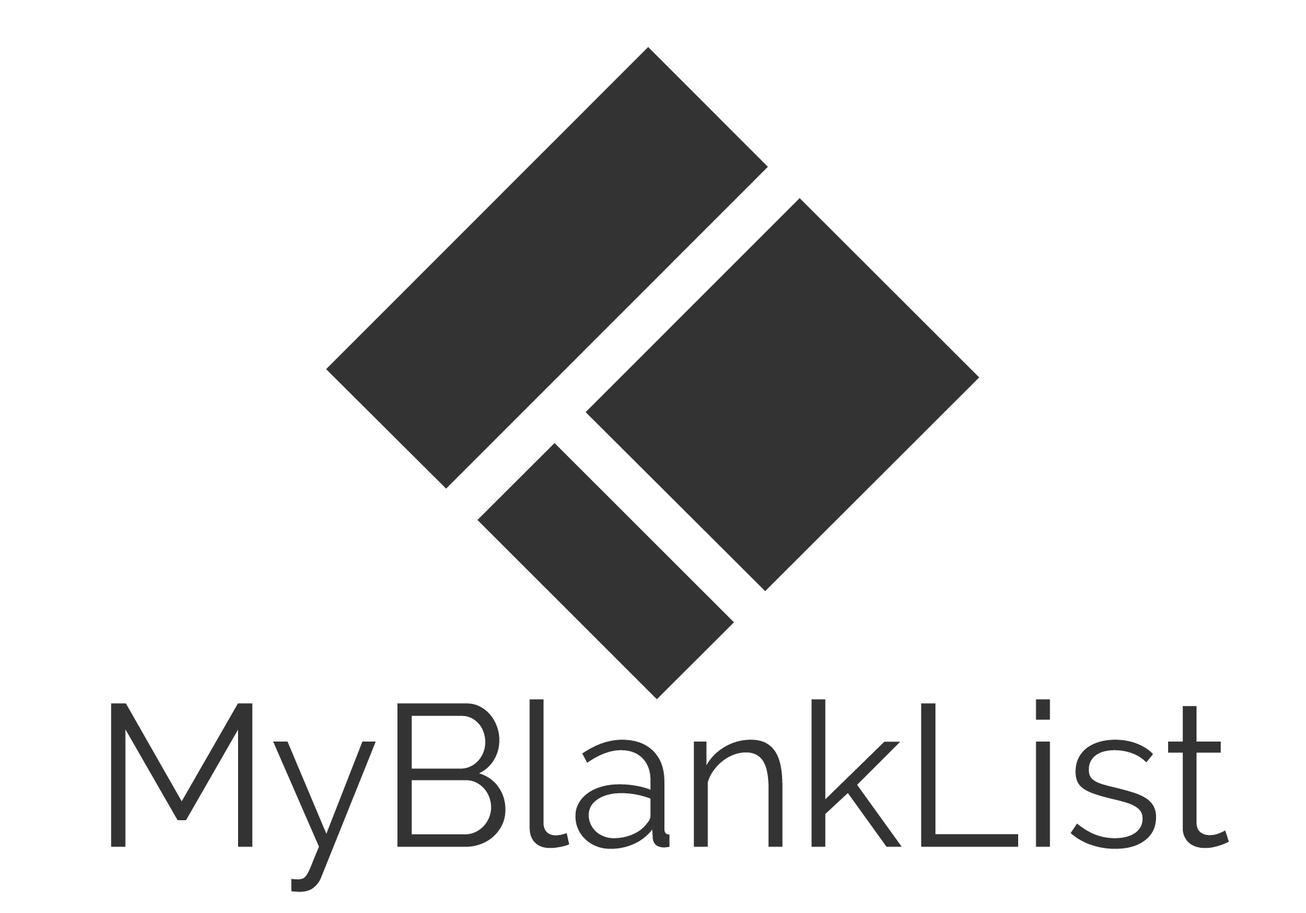
<style>
.page{position:relative;width:1306px;height:913px;background:#ffffff}
.page>*{position:absolute;margin:0}
.t1{font:201.7px "Raleway-Regular";color:#333333}
</style>
<div class="page">
<p class="t1" style="left:111px;top:699px;width:1118px;height:193px">MyBlankList</p>
</div>
